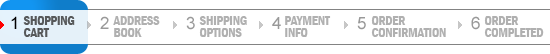
<style>
.page{position:relative;width:550px;height:54px;background:#ffffff}
.page>*{position:absolute;margin:0}
.t1{font:17px "ArialMT";letter-spacing:0.002em;color:#010000}
.t2{font:12.5px/12px "FranklinGothic-DemiCond";color:#57595a}
.t3{font:17px "ArialMT";letter-spacing:0.002em;color:#999999}
.t4{font:12.5px/12px "FranklinGothic-DemiCond";color:#b0b0b0}
</style>
<div class="page">
<p class="t1" style="left:11px;top:16px;width:6px;height:13px">1</p>
<p class="t2" style="left:23px;top:16px;width:52px;height:21px">SHOPPING<br>CART</p>
<p class="t3" style="left:100px;top:16px;width:9px;height:13px">2</p>
<p class="t4" style="left:113px;top:16px;width:47px;height:21px">ADDRESS<br>BOOK</p>
<p class="t3" style="left:186px;top:16px;width:9px;height:14px">3</p>
<p class="t4" style="left:199px;top:16px;width:48px;height:21px">SHIPPING<br>OPTIONS</p>
<p class="t3" style="left:272px;top:17px;width:9px;height:12px">4</p>
<p class="t4" style="left:285px;top:16px;width:46px;height:21px">PAYMENT<br>INFO</p>
<p class="t3" style="left:357px;top:17px;width:9px;height:13px">5</p>
<p class="t4" style="left:371px;top:16px;width:75px;height:21px">ORDER<br>CONFIRMATION</p>
<p class="t3" style="left:471px;top:16px;width:9px;height:14px">6</p>
<p class="t4" style="left:484px;top:16px;width:60px;height:21px">ORDER<br>COMPLETED</p>
</div>
